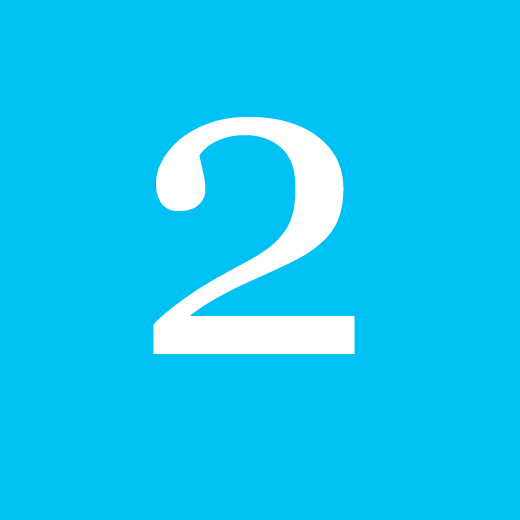
<style>
.page{position:relative;width:520px;height:520px;background:#00c1f3}
.page>*{position:absolute;margin:0}
.t1{font:439.3px "Georgia";color:#ffffff}
</style>
<div class="page">
<p class="t1" style="left:153px;top:117px;width:202px;height:237px">2</p>
</div>
